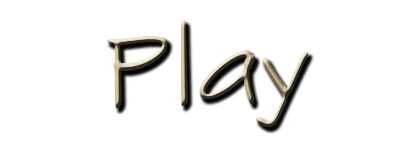
<style>
.page{position:relative;width:400px;height:150px;background:#ffffff}
.page>*{position:absolute;margin:0}
.t1{font:100px "SketchFlowPrint"}
</style>
<div class="page">
<p class="t1" style="left:106px;top:20px;width:203px;height:107px">Play</p>
</div>
